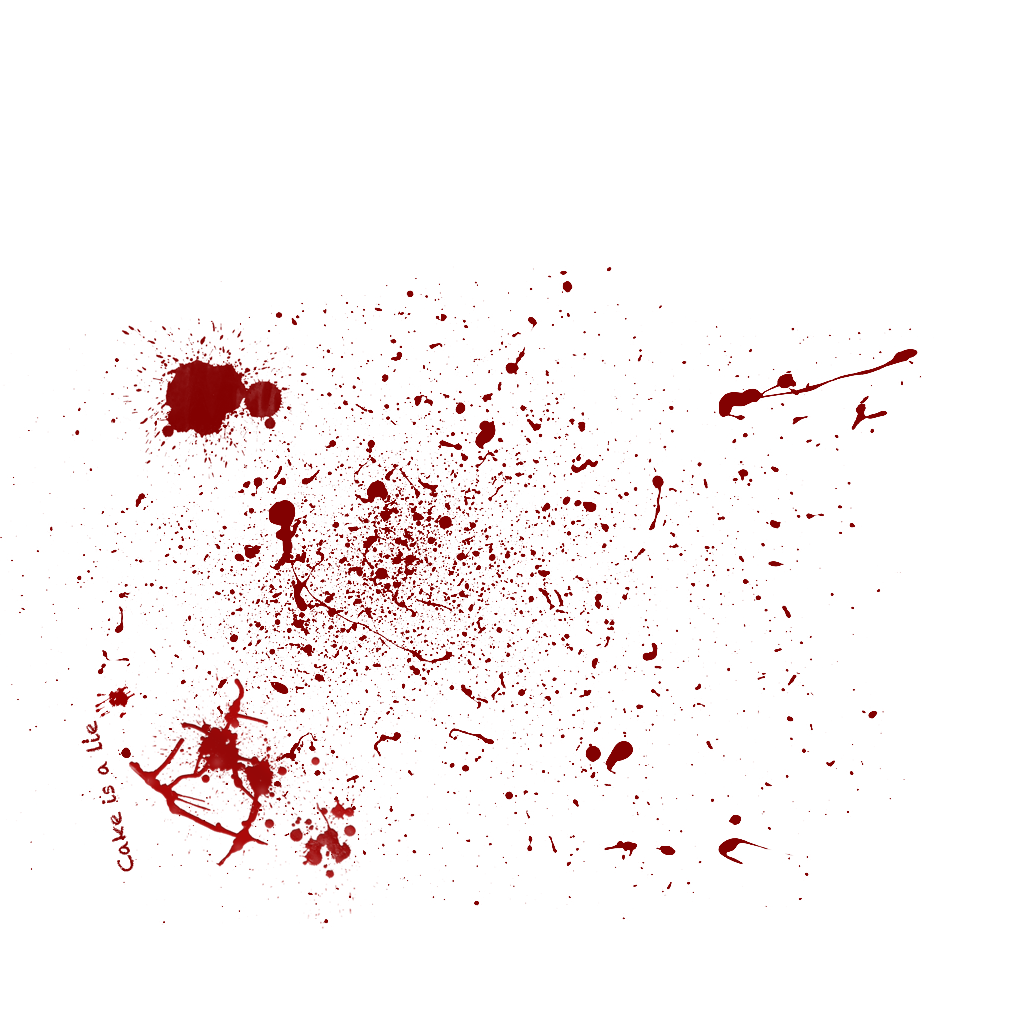
<style>
.page{position:relative;width:1024px;height:1024px;background:#ffffff}
.page>*{position:absolute;margin:0}
.t1{font:20.7px "Chalkduster";color:#820101}
</style>
<div class="page">
<p class="t1" style="left:85px;top:720px;width:49px;height:152px;rotate:-105deg">Cake is a lie</p>
</div>
